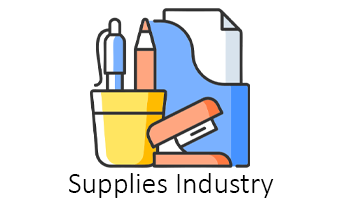
<style>
.page{position:relative;width:342px;height:208px;background:#ffffff}
.page>*{position:absolute;margin:0}
.t1{font:30px "Calibri-Light";color:#000000}
</style>
<div class="page">
<p class="t1" style="left:69px;top:173px;width:205px;height:25px">Supplies Industry</p>
</div>
